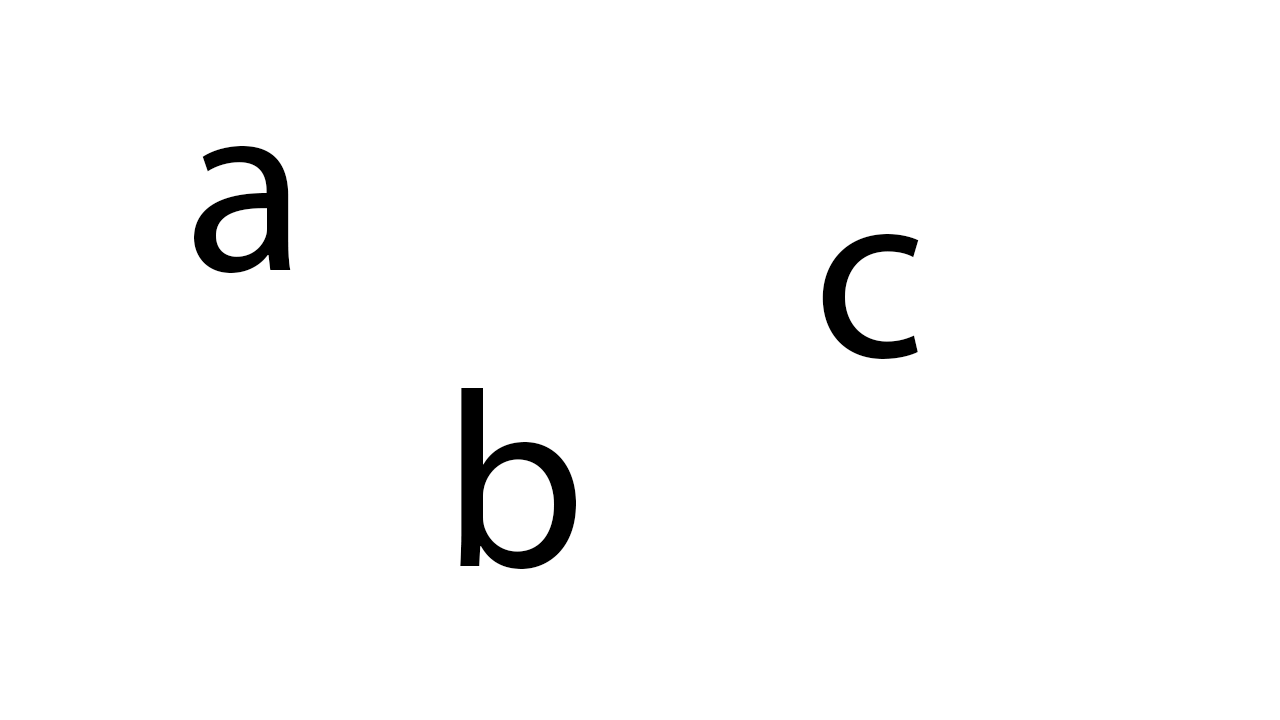
<style>
.page{position:relative;width:1280px;height:720px;background:#ffffff}
.page>*{position:absolute;margin:0}
.t1{font:250px "MyriadPro-Regular";color:#000000}
</style>
<div class="page">
<p class="t1" style="left:194px;top:146px;width:97px;height:127px">a</p>
<p class="t1" style="left:822px;top:234px;width:97px;height:125px">c</p>
<p class="t1" style="left:460px;top:388px;width:116px;height:181px">b</p>
</div>
